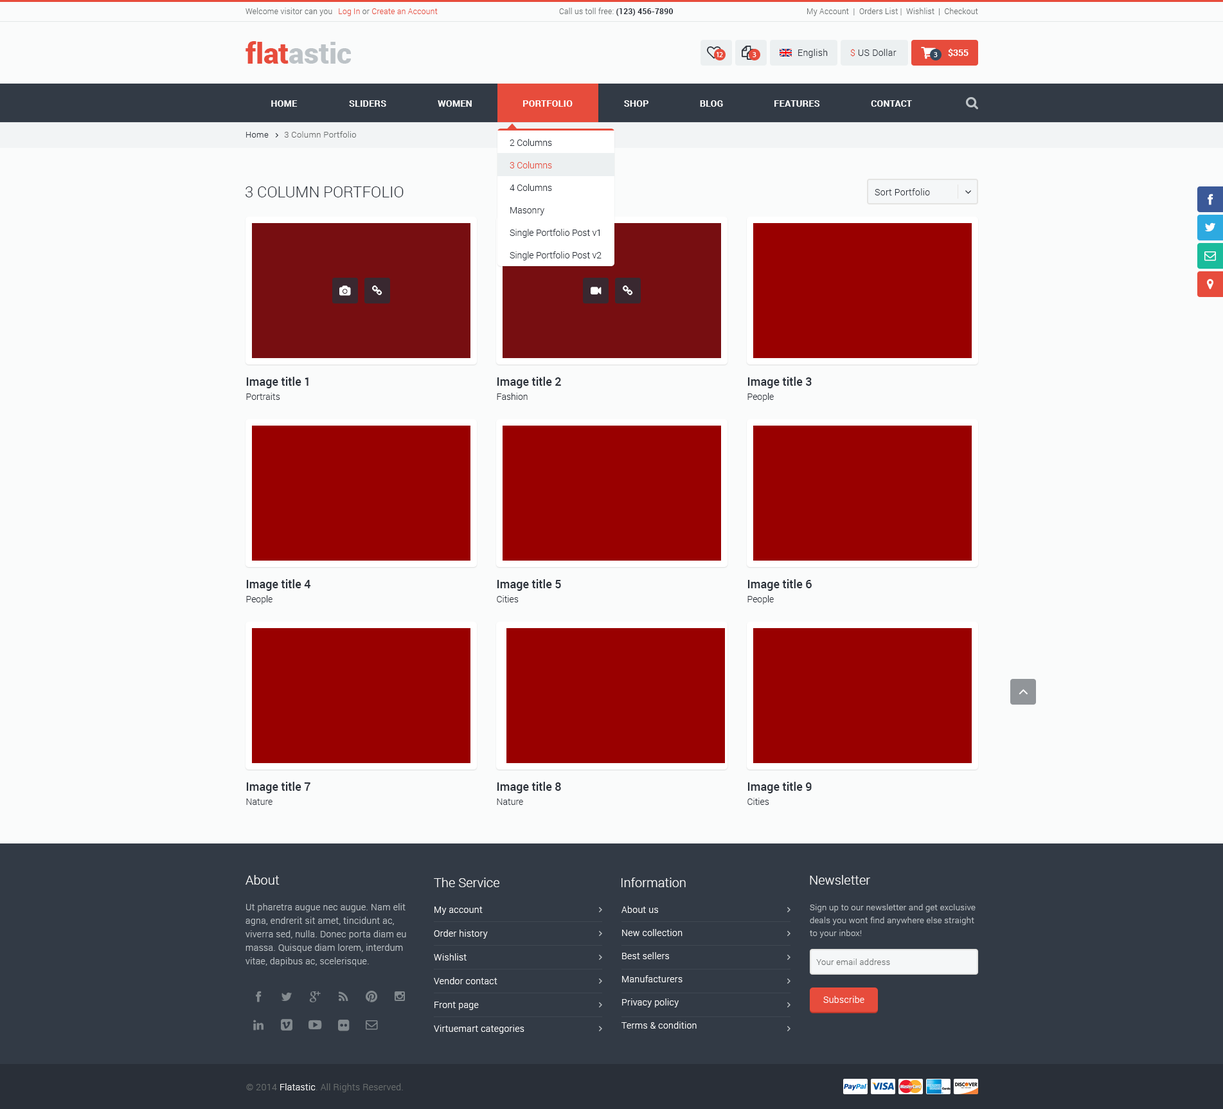
<style>
.page{position:relative;width:1223px;height:1109px;background:#fafbfb}
.page>*{position:absolute;margin:0}
.t1{font:7.7px "Roboto-Light";letter-spacing:0.025em;color:#696e6e}
.t2{font:7.7px "Roboto-Light";letter-spacing:0.025em;color:#e74c3c}
.t3{font:7.7px "Roboto-Bold";letter-spacing:0.025em;color:#292f38}
.t4{font:28.9px "Roboto-Black";color:#bdc3c7}
.t5{font:28.9px "Roboto-Black";color:#e74c3c}
.t6{font:7.7px "MyriadPro-Regular";letter-spacing:-0.075em;color:#ffffff}
.t7{font:9px "Roboto-Light";letter-spacing:0.025em;color:#292f38}
.t8{font:9px "Roboto-Light";letter-spacing:0.025em;color:#e74c3c}
.t9{font:9px "Roboto-Bold";color:#ffffff}
.t10{font:9px "Roboto-Bold";letter-spacing:0.025em;color:#ffffff;text-transform:uppercase}
.t11{font:8.4px "Roboto-Light";letter-spacing:0.025em;color:#696e6e}
.t12{font:8.4px "Roboto-Light";letter-spacing:0.025em;color:#292f38}
.t13{font:8.4px "Roboto-Light";letter-spacing:0.025em;color:#6a6a6a}
.t14{font:9px/22.5px "Roboto-Light";color:#292f38}
.t15{font:9px/22.5px "Roboto-Light";color:#e74c3c}
.t16{font:15.4px "Roboto-Light";color:#292f38;text-transform:uppercase}
.t17{font:11.6px/14.1px "Roboto-Medium";color:#292f38}
.t18{font:9px/14.1px "Roboto-Light";color:#292f38}
.t19{font:12.9px "Roboto-Light";color:#f9f9f9}
.t20{font:9px/13.5px "Roboto-Light";letter-spacing:0.025em;color:#bdc3c7}
.t21{font:9px/23.1px "Roboto-Light";letter-spacing:0.025em;color:#ffffff}
.t22{font:8.4px/12.9px "Roboto-Light";letter-spacing:0.025em;color:#bdc3c7}
.t23{font:9px/23.8px "Roboto-Light";letter-spacing:0.025em;color:#ffffff}
.t24{font:9px "Roboto-Light";letter-spacing:0.025em;color:#ffffff}
.t25{font:9px "Roboto-Light";letter-spacing:0.025em;color:#696e6e}
</style>
<div class="page">
<p class="t1" style="left:246px;top:8px;width:192px;height:8px">Welcome visitor can you <span class="t2">Log In </span>or <span class="t2">Create an Account</span></p>
<p class="t1" style="left:559px;top:8px;width:114px;height:8px">Call us toll free: <span class="t3">(123) 456-7890</span></p>
<p class="t1" style="left:807px;top:8px;width:171px;height:8px">My Account  |  Orders List |  Wishlist  |  Checkout</p>
<p class="t4" style="left:246px;top:41px;width:105px;height:23px"><span class="t5">flat</span>astic</p>
<p class="t6" style="left:717px;top:52px;width:6px;height:5px">12</p>
<p class="t6" style="left:753px;top:52px;width:4px;height:5px">3</p>
<p class="t7" style="left:798px;top:49px;width:30px;height:9px">English</p>
<p class="t7" style="left:851px;top:49px;width:46px;height:8px"><span class="t8">$ </span>US Dollar</p>
<p class="t6" style="left:934px;top:52px;width:4px;height:5px">3</p>
<p class="t9" style="left:948px;top:48px;width:21px;height:9px">$355</p>
<p class="t10" style="left:271px;top:100px;width:27px;height:7px">home</p>
<p class="t10" style="left:349px;top:100px;width:37px;height:7px">Sliders</p>
<p class="t10" style="left:438px;top:100px;width:34px;height:7px">women</p>
<p class="t10" style="left:523px;top:100px;width:50px;height:7px">Portfolio</p>
<p class="t10" style="left:624px;top:100px;width:25px;height:7px">Shop</p>
<p class="t10" style="left:700px;top:100px;width:23px;height:7px">Blog</p>
<p class="t10" style="left:775px;top:100px;width:45px;height:7px">Features</p>
<p class="t10" style="left:871px;top:100px;width:41px;height:7px">Contact</p>
<p class="t11" style="left:246px;top:131px;width:110px;height:7px"><span class="t12">Home</span><span class="t13">       3 Column </span>Portfolio</p>
<p class="t14" style="left:510px;top:139px;width:92px;height:121px">2 Columns<br><span class="t15">3 Columns<br></span>4 Columns<br>Masonry<br>Single Portfolio Post v1<br>Single Portfolio Post v2</p>
<p class="t16" style="left:246px;top:186px;width:158px;height:11px">3 column Portfolio</p>
<p class="t7" style="left:875px;top:188px;width:55px;height:7px">Sort Portfolio</p>
<p class="t17" style="left:246px;top:377px;width:63px;height:23px">Image title 1<br><span class="t18">Portraits</span></p>
<p class="t17" style="left:497px;top:377px;width:64px;height:23px">Image title 2<br><span class="t18">Fashion</span></p>
<p class="t17" style="left:748px;top:377px;width:64px;height:25px">Image title 3<br><span class="t18">People</span></p>
<p class="t17" style="left:246px;top:579px;width:65px;height:25px">Image title 4<br><span class="t18">People</span></p>
<p class="t17" style="left:497px;top:579px;width:64px;height:23px">Image title 5<br><span class="t18">Cities</span></p>
<p class="t17" style="left:748px;top:579px;width:64px;height:25px">Image title 6<br><span class="t18">People</span></p>
<p class="t17" style="left:246px;top:782px;width:64px;height:23px">Image title 7<br><span class="t18">Nature</span></p>
<p class="t17" style="left:497px;top:782px;width:64px;height:23px">Image title 8<br><span class="t18">Nature</span></p>
<p class="t17" style="left:748px;top:782px;width:64px;height:23px">Image title 9<br><span class="t18">Cities</span></p>
<p class="t19" style="left:246px;top:875px;width:34px;height:10px">About</p>
<p class="t19" style="left:434px;top:878px;width:66px;height:9px">The Service</p>
<p class="t19" style="left:622px;top:878px;width:64px;height:9px">Information</p>
<p class="t19" style="left:810px;top:875px;width:60px;height:10px">Newsletter</p>
<p class="t20" style="left:246px;top:903px;width:160px;height:63px">Ut pharetra augue nec augue. Nam elit agna, endrerit sit amet, tincidunt ac, viverra sed, nulla. Donec porta diam eu massa. Quisque diam lorem, interdum vitae, dapibus ac, scelerisque.<br> vitae, pede. Donec eget tellus non erat lacinia fermentum. Donec in velit vel ipsum auctor pulvinar.</p>
<p class="t21" style="left:622px;top:906px;width:75px;height:123px">About us<br>New collection<br>Best sellers<br>Manufacturers<br>Privacy policy<br>Terms &amp; condition</p>
<p class="t22" style="left:810px;top:904px;width:166px;height:34px">Sign up to our newsletter and get exclusive deals you wont find anywhere else straight to your inbox!</p>
<p class="t23" style="left:434px;top:906px;width:91px;height:128px">My account<br>Order history<br>Wishlist<br>Vendor contact<br>Front page<br>Virtuemart categories</p>
<p class="t11" style="left:816px;top:959px;width:74px;height:6px">Your email address</p>
<p class="t24" style="left:824px;top:996px;width:41px;height:7px">Subscribe</p>
<p class="t25" style="left:246px;top:1083px;width:157px;height:9px">© 2014 <span class="t24">Flatastic</span>. All Rights Reserved.</p>
</div>
